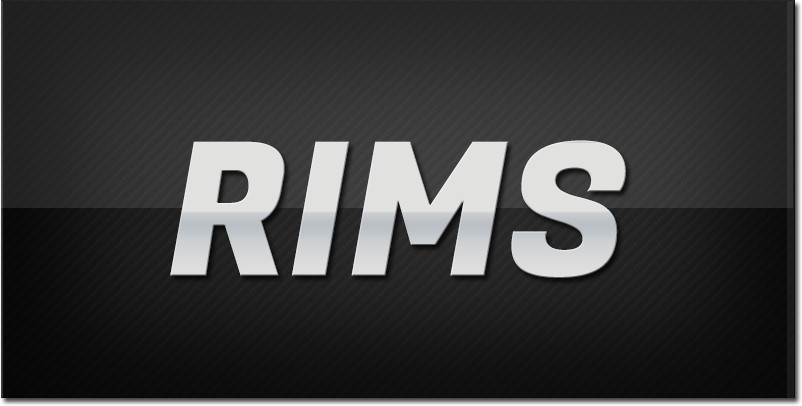
<style>
.page{position:relative;width:802px;height:406px}
.page>*{position:absolute;margin:0}
.t1{font:185.2px "FugazOne-Regular";color:#dfdfdf}
</style>
<div class="page">
<p class="t1" style="left:170px;top:140px;width:456px;height:138px">RIMS</p>
</div>
